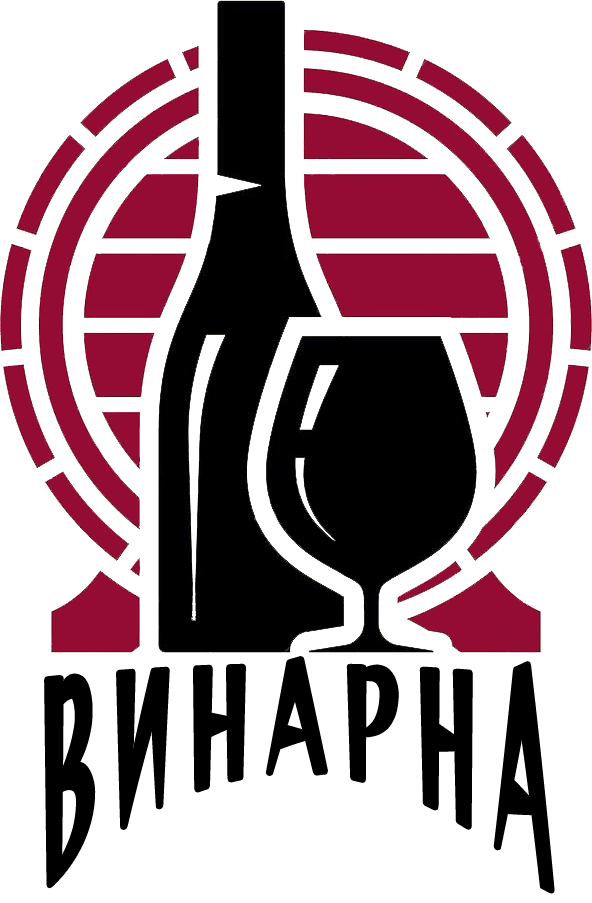
<style>
.page{position:relative;width:592px;height:903px;background:#ffffff}
.page>*{position:absolute;margin:0}
.t1{font:283.9px "ReggaeOne-Regular";color:#000000;scale:0.27 1}
</style>
<div class="page">
<p class="t1" style="left:47px;top:659px;width:505px;height:232px">ВИНАРНА</p>
</div>
